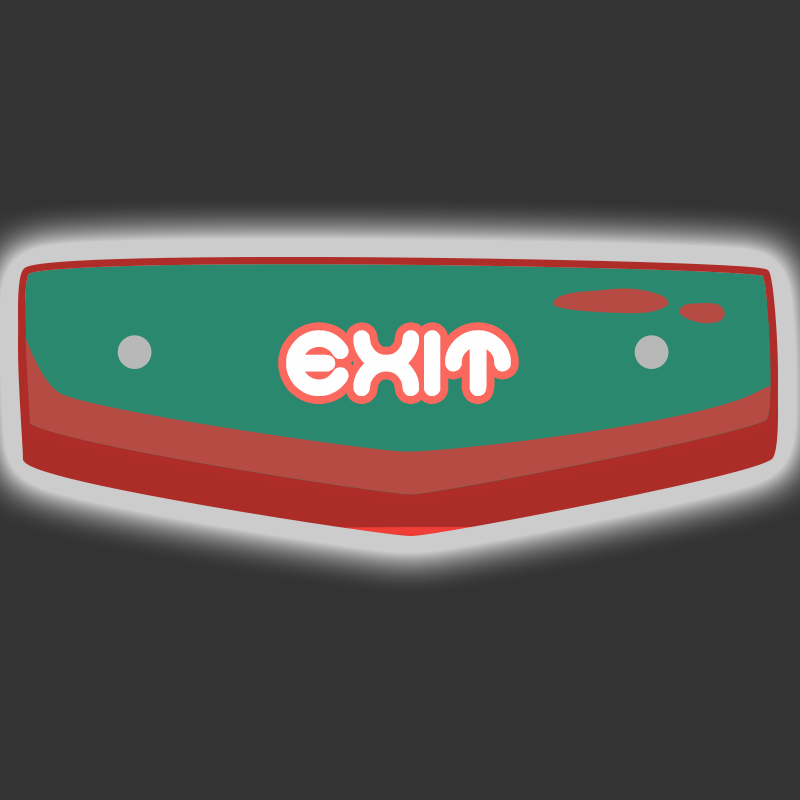
<style>
.page{position:relative;width:800px;height:800px;background:#333333}
.page>*{position:absolute;margin:0}
.t1{font:100px "smileyturtle";color:#fffefe}
</style>
<div class="page">
<p class="t1" style="left:286px;top:330px;width:225px;height:66px">EXIT</p>
</div>
